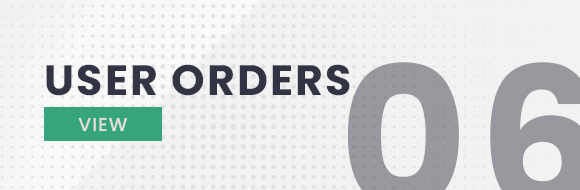
<style>
.page{position:relative;width:580px;height:190px;background:#f2f2f2}
.page>*{position:absolute;margin:0}
.t1{font:42.6px "Poppins-Bold";letter-spacing:0.05em;color:#323443}
.t2{font:18.6px "Poppins-Medium";letter-spacing:0.05em;color:#e4dfdb}
</style>
<div class="page">
<p class="t1" style="left:46px;top:64px;width:304px;height:32px">USER ORDERS</p>
<p class="t2" style="left:78px;top:117px;width:49px;height:15px">VIEW</p>
</div>
